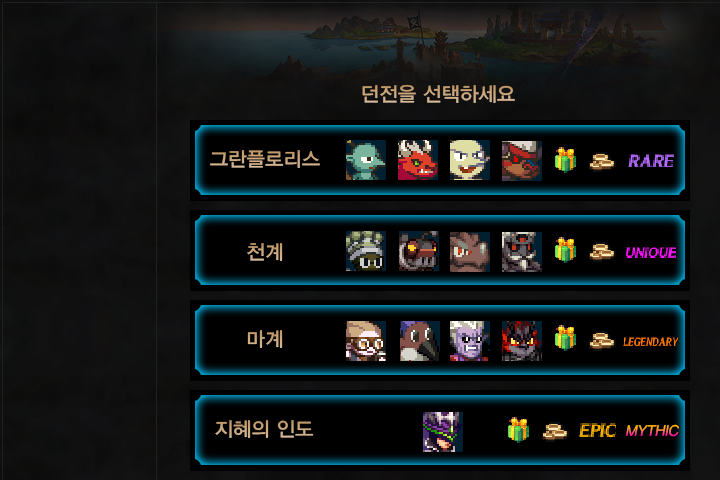
<style>
.page{position:relative;width:720px;height:480px;background:#000000}
.page>*{position:absolute;margin:0}
.t1{font:20px "YDIYGO330";color:#cba87f}
.t2{font:15px "YDIYGO330";font-style:italic}
</style>
<div class="page">
<p class="t1" style="left:362px;top:84px;width:153px;height:19px">던전을 선택하세요</p>
<p class="t1" style="left:210px;top:150px;width:110px;height:18px">그란플로리스</p>
<p class="t1" style="left:247px;top:243px;width:36px;height:18px">천계</p>
<p class="t1" style="left:247px;top:330px;width:36px;height:18px">마계</p>
<p class="t1" style="left:215px;top:420px;width:99px;height:18px">지혜의 인도</p>
<p class="t2" style="left:626px;top:424px;width:54px;height:13px">MYTHIC</p>
</div>
